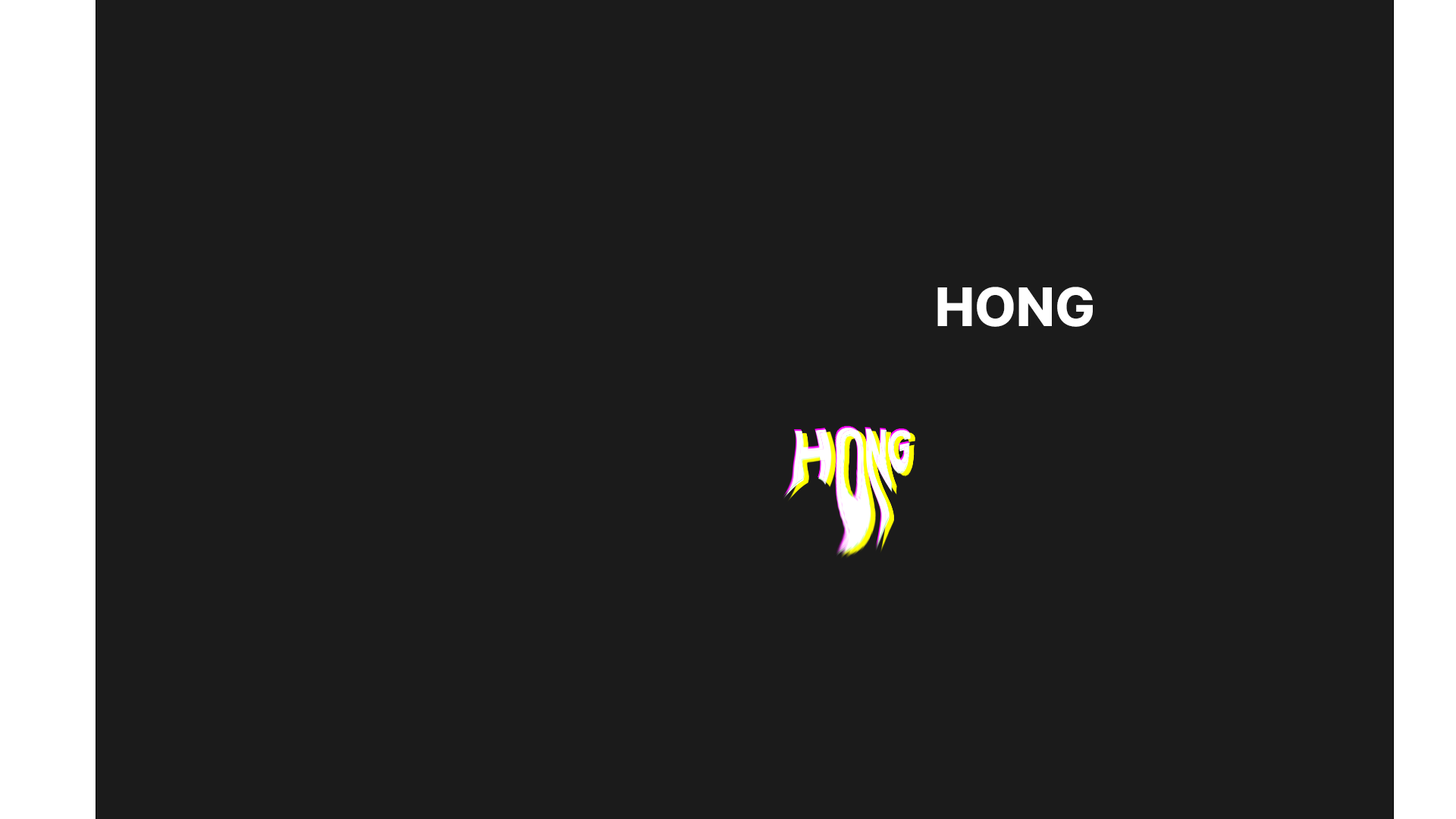
<style>
.page{position:relative;width:1456px;height:819px;background:#1b1b1b}
.page>*{position:absolute;margin:0}
.t1{font:54.6px "Pretendard-ExtraBold";color:#ffffff}
</style>
<div class="page">
<p class="t1" style="left:937px;top:287px;width:156px;height:40px">HONG</p>
</div>
